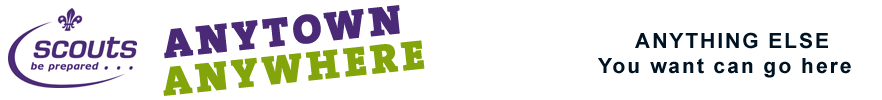
<style>
.page{position:relative;width:882px;height:100px;background:#ffffff}
.page>*{position:absolute;margin:0}
.t1{font:41.7px "TheSerifBlack-Plain";letter-spacing:0.1em;color:#4a2a77}
.t2{font:41.7px "TheSerifBlack-Plain";letter-spacing:0.1em;color:#84a40b}
.t3{font:20.8px "Arial-BoldMT";letter-spacing:0.1em;color:#001323}
</style>
<div class="page">
<p class="t1" style="left:164px;top:5px;width:236px;height:54px;rotate:-6deg">ANYTOWN</p>
<p class="t2" style="left:163px;top:40px;width:262px;height:56px;rotate:-6deg">ANYWHERE</p>
<p class="t3" style="left:635px;top:32px;width:193px;height:17px">ANYTHING ELSE</p>
<p class="t3" style="left:598px;top:58px;width:253px;height:20px">You want can go here</p>
</div>
